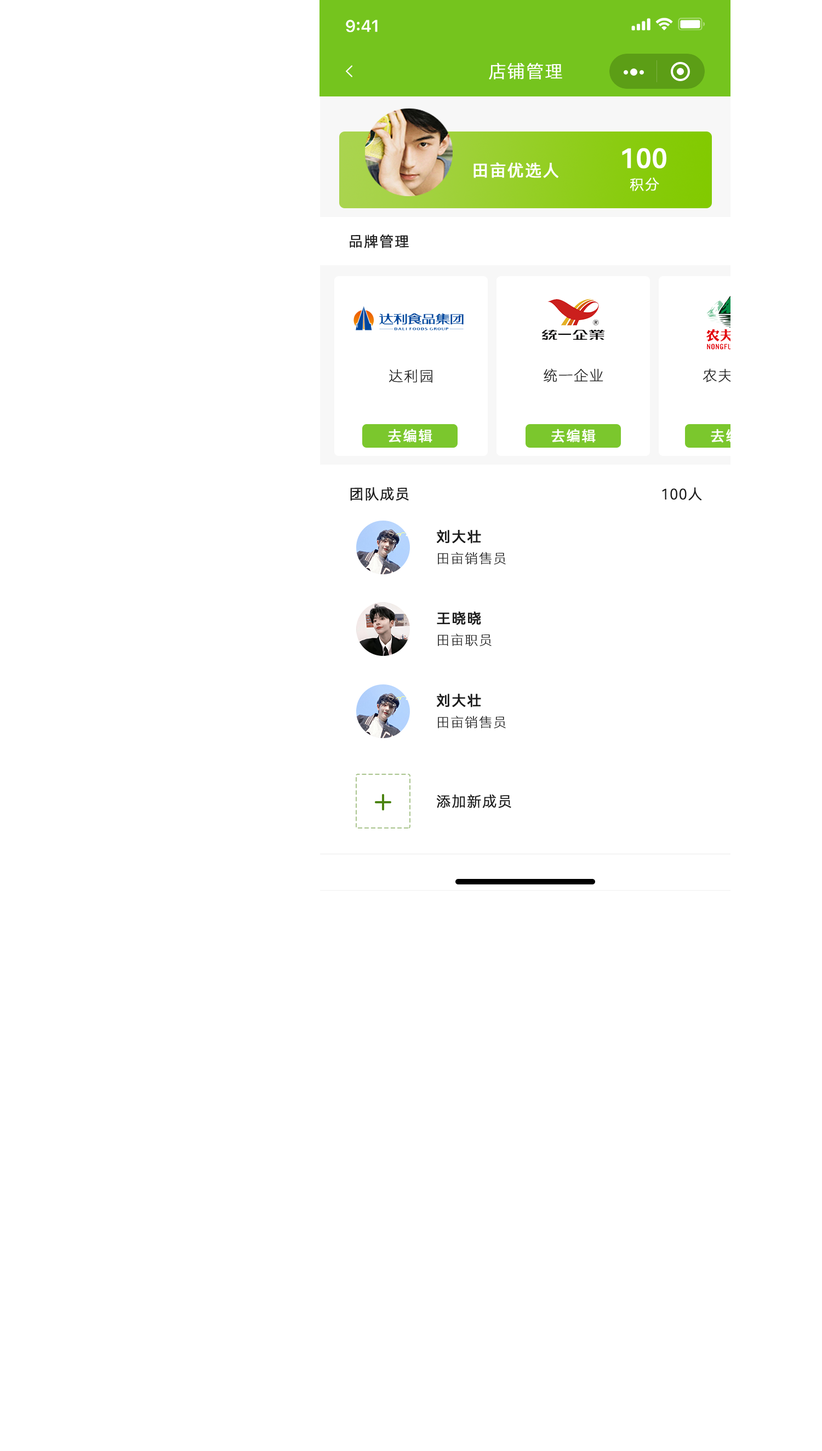
<style>
.page{position:relative;width:822px;height:1451px;background:#ffffff}
.page>*{position:absolute;margin:0}
.t1{font:17.5px "HarmonyOS_Sans_SC_Light";letter-spacing:0.04em;color:#ffffff;text-transform:uppercase;font-weight:bold}
.t2{font:26.3px "HarmonyOS_Sans_Medium";color:#ffffff;text-transform:uppercase;font-weight:bold}
.t3{font:16.4px "HarmonyOS_Sans_SC";letter-spacing:0.04em;color:#ffffff;text-transform:uppercase;font-weight:bold}
.t4{font:14.2px "HarmonyOS_Sans_SC_Light";letter-spacing:0.04em;color:#ffffff;text-transform:uppercase;font-weight:bold}
.t5{font:14.2px "HarmonyOS_Sans_SC_Light";letter-spacing:0.04em;color:#1c1c1c;text-transform:uppercase;font-weight:bold}
.t6{font:14.2px "HarmonyOS_Sans_SC_Thin";letter-spacing:0.04em;color:#1c1c1c;text-transform:uppercase;font-weight:bold}
.t7{font:14.2px "HarmonyOS_Sans_SC_Thin";letter-spacing:0.04em;text-transform:uppercase;font-weight:bold}
.t8{font:14.2px "HarmonyOS_Sans_SC";letter-spacing:0.04em;color:#ffffff;text-transform:uppercase;font-weight:bold}
.t9{font:14.2px "HarmonyOS_Sans_SC";letter-spacing:0.04em;color:#1c1c1c;text-transform:uppercase;font-weight:bold}
.t10{font:13.1px "HarmonyOS_Sans_SC_Thin";letter-spacing:0.04em;color:#1c1c1c;text-transform:uppercase;font-weight:bold}
</style>
<div class="page">
<p class="t1" style="left:489px;top:62px;width:73px;height:17px">店铺管理</p>
<p class="t2" style="left:622px;top:148px;width:44px;height:21px">100</p>
<p class="t3" style="left:473px;top:162px;width:85px;height:16px">田亩优选人</p>
<p class="t4" style="left:630px;top:178px;width:29px;height:13px">积分</p>
<p class="t5" style="left:350px;top:234px;width:59px;height:14px">品牌管理</p>
<p class="t6" style="left:389px;top:369px;width:43px;height:14px">达利园</p>
<p class="t6" style="left:544px;top:368px;width:59px;height:14px">统一企业</p>
<p class="t7" style="left:703px;top:368px;width:60px;height:14px">农夫山泉</p>
<p class="t8" style="left:388px;top:428px;width:44px;height:15px">去编辑</p>
<p class="t8" style="left:551px;top:428px;width:45px;height:15px">去编辑</p>
<p class="t8" style="left:711px;top:428px;width:44px;height:15px">去编辑</p>
<p class="t5" style="left:350px;top:487px;width:59px;height:14px">团队成员</p>
<p class="t5" style="left:662px;top:487px;width:40px;height:13px">100人</p>
<p class="t9" style="left:437px;top:530px;width:44px;height:14px">刘大壮</p>
<p class="t10" style="left:438px;top:552px;width:68px;height:13px">田亩销售员</p>
<p class="t9" style="left:437px;top:611px;width:44px;height:14px">王晓晓</p>
<p class="t10" style="left:438px;top:633px;width:53px;height:14px">田亩职员</p>
<p class="t9" style="left:437px;top:694px;width:44px;height:13px">刘大壮</p>
<p class="t10" style="left:438px;top:716px;width:68px;height:13px">田亩销售员</p>
<p class="t5" style="left:437px;top:794px;width:74px;height:14px">添加新成员</p>
</div>
